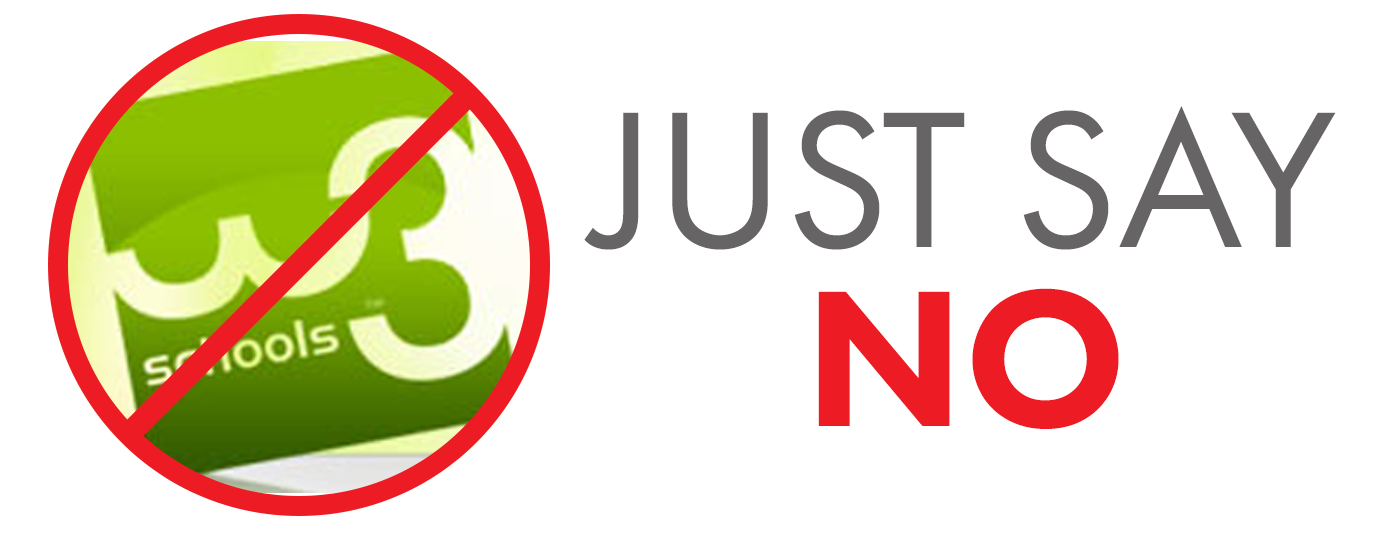
<style>
.page{position:relative;width:1400px;height:560px;background:#ffffff}
.page>*{position:absolute;margin:0}
.t1{font:201.3px/179px "FuturaPT-Book";color:#666464}
.t2{font:201.3px/179px "FuturaPT-Heavy";color:#ed1c24}
</style>
<div class="page">
<p class="t1" style="left:584px;top:106px;width:752px;height:323px;text-align:center">JUST SAY<br><span class="t2">NO</span></p>
</div>
